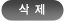
<style>
.page{position:relative;width:64px;height:21px}
.page>*{position:absolute;margin:0}
.t1{font:12px "YDIYGO330";letter-spacing:-0.05em;color:#ffffff;scale:0.9 1}
</style>
<div class="page">
<p class="t1" style="left:19px;top:4px;width:26px;height:11px">삭  제</p>
</div>
